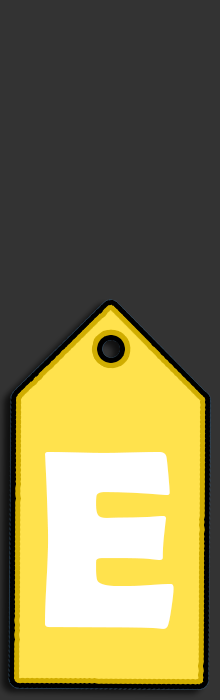
<style>
.page{position:relative;width:220px;height:700px;background:#333333}
.page>*{position:absolute;margin:0}
.t1{font:256px "BerlinSansFBDemi-Bold";letter-spacing:0.075em;color:#ffffff}
</style>
<div class="page">
<p class="t1" style="left:45px;top:452px;width:129px;height:177px">E</p>
</div>
